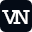
<style>
.page{position:relative;width:32px;height:32px;background:#040b15}
.page>*{position:absolute;margin:0}
.t1{font:21px "Rockwell";letter-spacing:-0.2em;color:#ffffff;scale:1.07 1}
</style>
<div class="page">
<p class="t1" style="left:2px;top:10px;width:28px;height:14px">VN</p>
</div>
